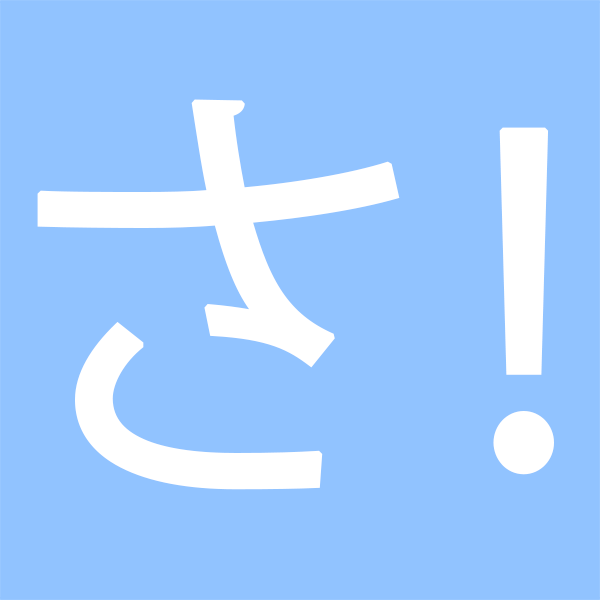
<style>
.page{position:relative;width:600px;height:600px;background:#91c3ff}
.page>*{position:absolute;margin:0}
.t1{font:440px "KozGoPr6N-Regular";color:#ffffff;font-weight:bold}
</style>
<div class="page">
<p class="t1" style="left:37px;top:99px;width:517px;height:391px">さ！</p>
</div>
